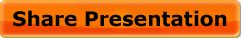
<style>
.page{position:relative;width:241px;height:38px}
.page>*{position:absolute;margin:0}
.t1{font:20px "Verdana-Bold";color:#000000}
</style>
<div class="page">
<p class="t1" style="left:13px;top:10px;width:214px;height:17px">Share Presentation</p>
</div>
